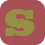
<style>
.page{position:relative;width:45px;height:45px;background:#a75157}
.page>*{position:absolute;margin:0}
.t1{font:50px "Saddlebag-Black";color:#949146}
</style>
<div class="page">
<p class="t1" style="left:5px;top:9px;width:30px;height:27px">S</p>
</div>
